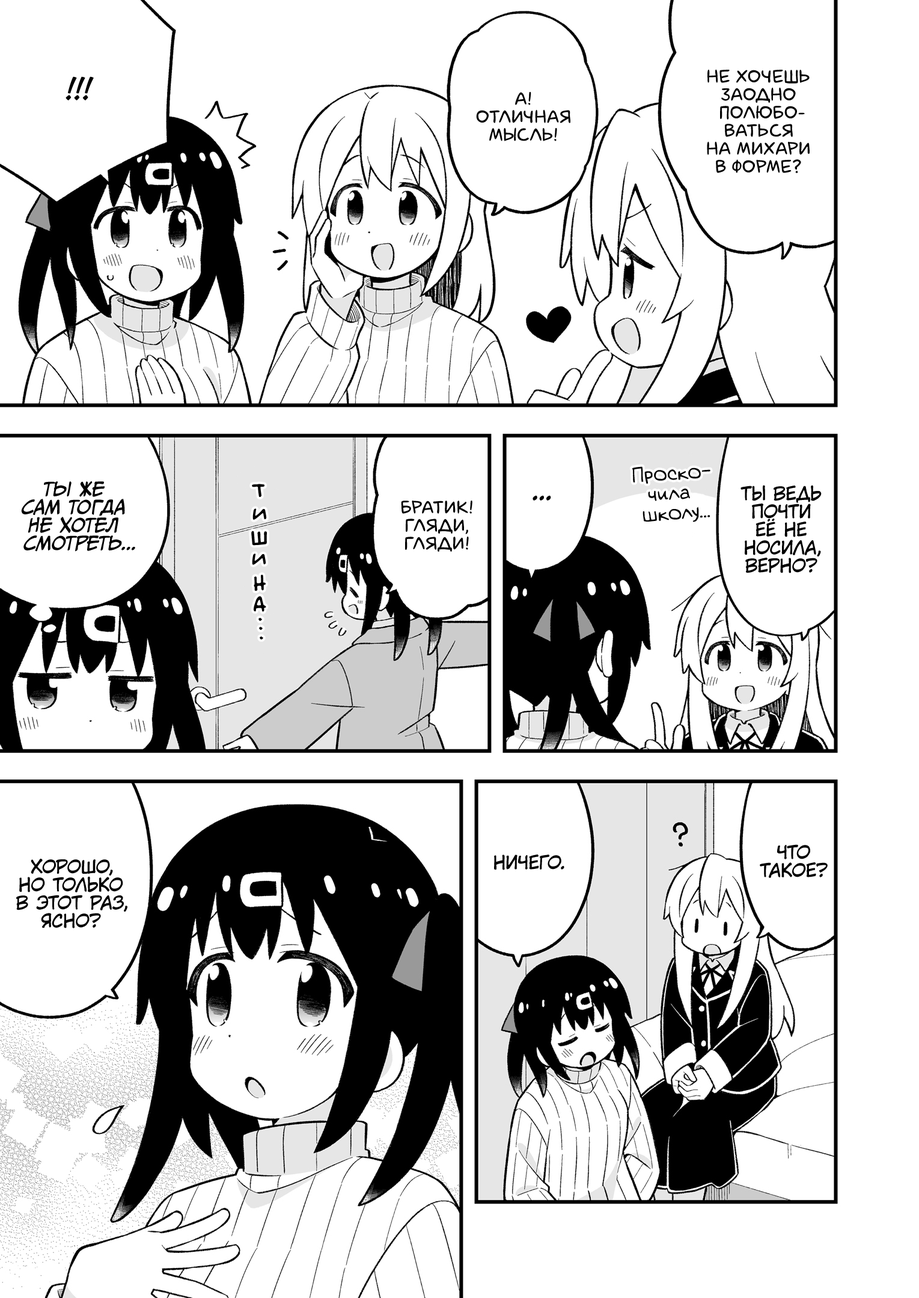
<style>
.page{position:relative;width:919px;height:1298px;background:#ffffff}
.page>*{position:absolute;margin:0}
.t1{font:28.8px "v_CCJeffCampbell";color:#000000;text-transform:uppercase}
.t2{font:18px "laCartoonerie";color:#000000;text-transform:uppercase}
.t3{font:19.8px "v_Augie";color:#000000}
.t4{font:18px "CCMeanwhile";color:#000000;text-transform:uppercase;font-style:italic}
.t5{font:25.2px "v_BillyTheFlyingRobotBBLC";color:#000000;text-transform:uppercase}
.t6{font:18px "KuraiVoice2";color:#000000;text-transform:uppercase}
.t7{font:25.2px "KuraiVoice2";color:#000000;text-transform:uppercase}
</style>
<div class="page">
<p class="t1" style="left:65px;top:76px;width:29px;height:24px">!!!</p>
<p class="t2" style="left:707px;top:69px;width:102px;height:104px;text-align:center">Не хочешь<br>заодно<br>полюбо-<br>ваться<br>на Михари<br>в форме?</p>
<p class="t2" style="left:476px;top:92px;width:94px;height:49px;text-align:center">А!<br>Отличная<br>мысль!</p>
<p class="t3" style="left:632px;top:466px;width:78px;height:56px;text-align:center;rotate:-4deg">Проско-<br>чила<br>школу...</p>
<p class="t4" style="left:21px;top:481px;width:114px;height:71px;text-align:center">Ты же<br>сам тогда<br>не хотел<br>смотреть...</p>
<p class="t5" style="left:252px;top:484px;width:12px;height:13px">т</p>
<p class="t6" style="left:740px;top:485px;width:81px;height:88px;text-align:center">Ты ведь<br>почти<br>её не<br>носила,<br>верно?</p>
<p class="t7" style="left:532px;top:495px;width:19px;height:6px">...</p>
<p class="t5" style="left:252px;top:508px;width:15px;height:12px">и</p>
<p class="t2" style="left:401px;top:501px;width:71px;height:51px;text-align:center">Братик!<br>Гляди,<br>гляди!</p>
<p class="t5" style="left:251px;top:531px;width:16px;height:15px">ш</p>
<p class="t5" style="left:252px;top:553px;width:14px;height:12px">и</p>
<p class="t5" style="left:254px;top:574px;width:12px;height:17px">н</p>
<p class="t5" style="left:254px;top:596px;width:12px;height:16px">а</p>
<p class="t5" style="left:258px;top:618px;width:4px;height:3px">.</p>
<p class="t5" style="left:259px;top:627px;width:4px;height:3px">.</p>
<p class="t5" style="left:260px;top:636px;width:3px;height:3px">.</p>
<p class="t6" style="left:760px;top:844px;width:67px;height:34px;text-align:center">Что<br>такое?</p>
<p class="t6" style="left:494px;top:854px;width:70px;height:16px">Ничего.</p>
<p class="t6" style="left:16px;top:859px;width:111px;height:69px;text-align:center">Хорошо,<br>но только<br>в этот раз,<br>ясно?</p>
</div>
